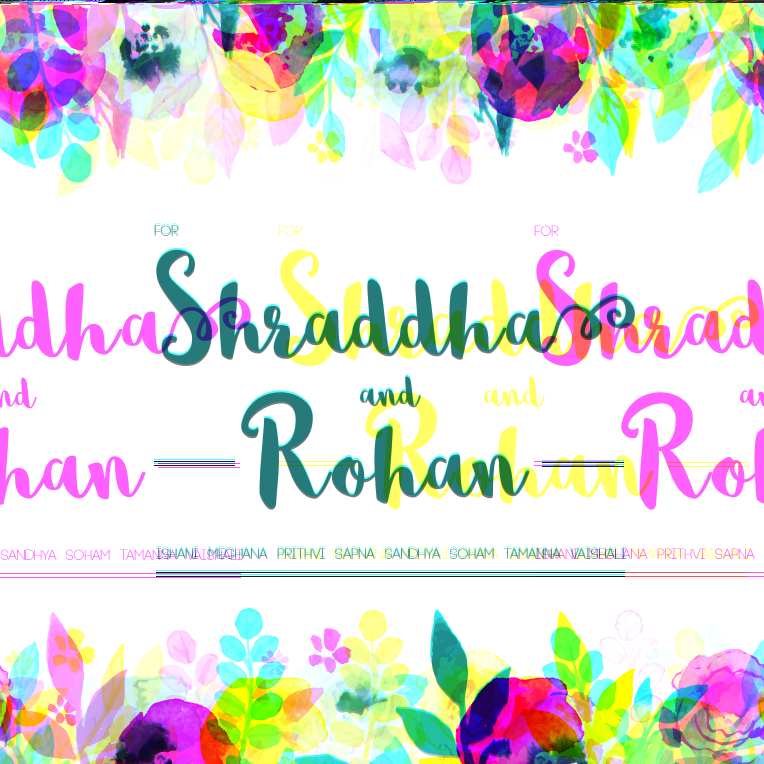
<style>
.page{position:relative;width:764px;height:764px;background:#ffffff}
.page>*{position:absolute;margin:0}
.t1{font:150px "Sophia"}
.t2{font:150px "SophiaLeft"}
.t3{font:150px "Sophia-Right"}
.t4{font:60px "Sophia"}
.t5{font:14px "Code-Light"}
</style>
<div class="page">
<p class="t1" style="left:156px;top:246px;width:479px;height:117px"><span class="t2">S</span>hraddh<span class="t3">a</span></p>
<p class="t4" style="left:360px;top:373px;width:61px;height:32px">and</p>
<p class="t1" style="left:241px;top:389px;width:289px;height:118px"><span class="t2">R</span>ohan</p>
<p class="t5" style="left:156px;top:545px;width:471px;height:11px">ishani  meghana  prithvi  sapna  sandhya  soham  tamanna  vaishali</p>
</div>
